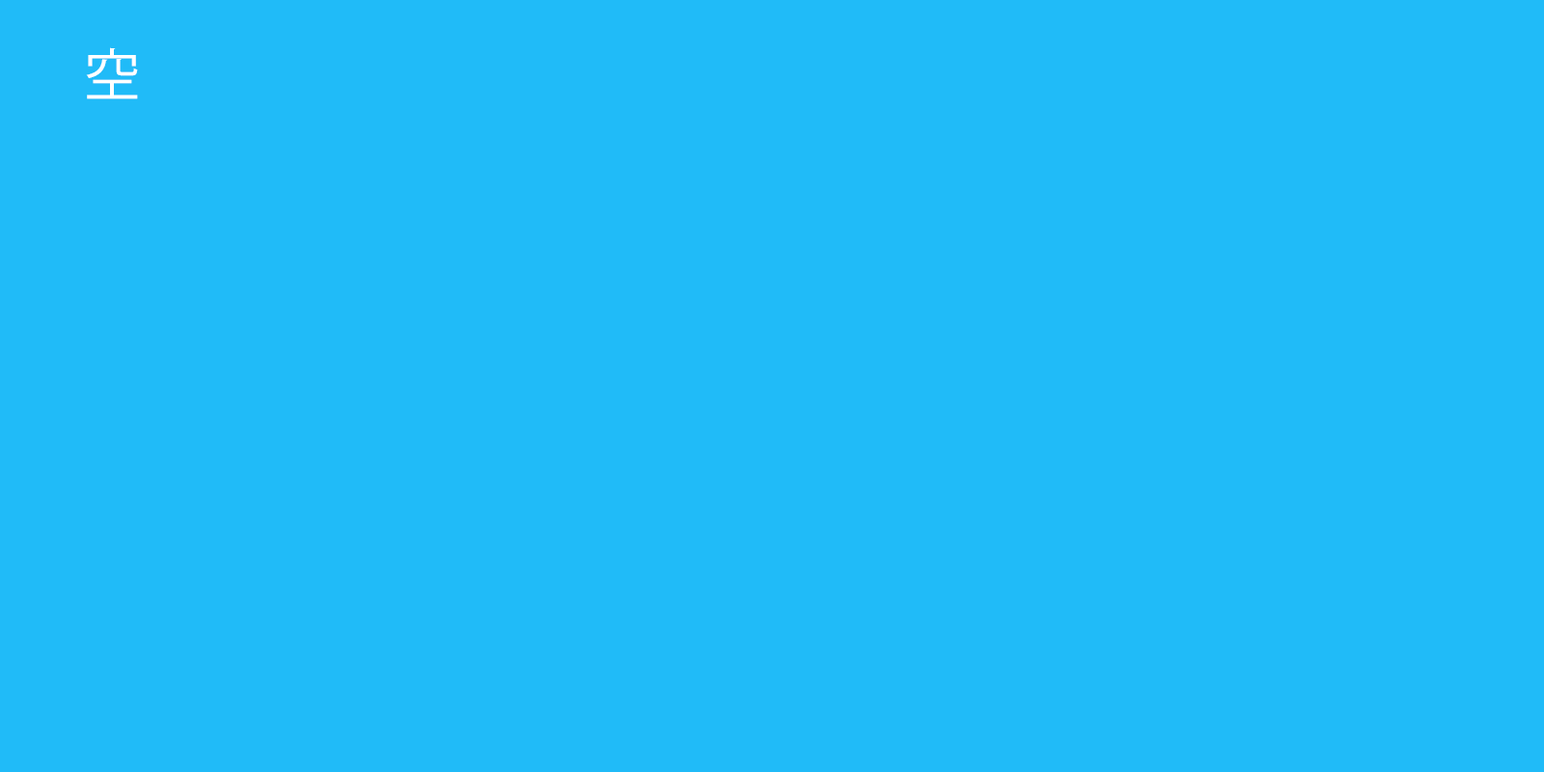
<style>
.page{position:relative;width:1544px;height:772px;background:#20bbf8}
.page>*{position:absolute;margin:0}
.t1{font:56.3px "KozGoPr6N-Regular";color:#ffffff}
</style>
<div class="page">
<p class="t1" style="left:86px;top:47px;width:52px;height:52px">空</p>
</div>
